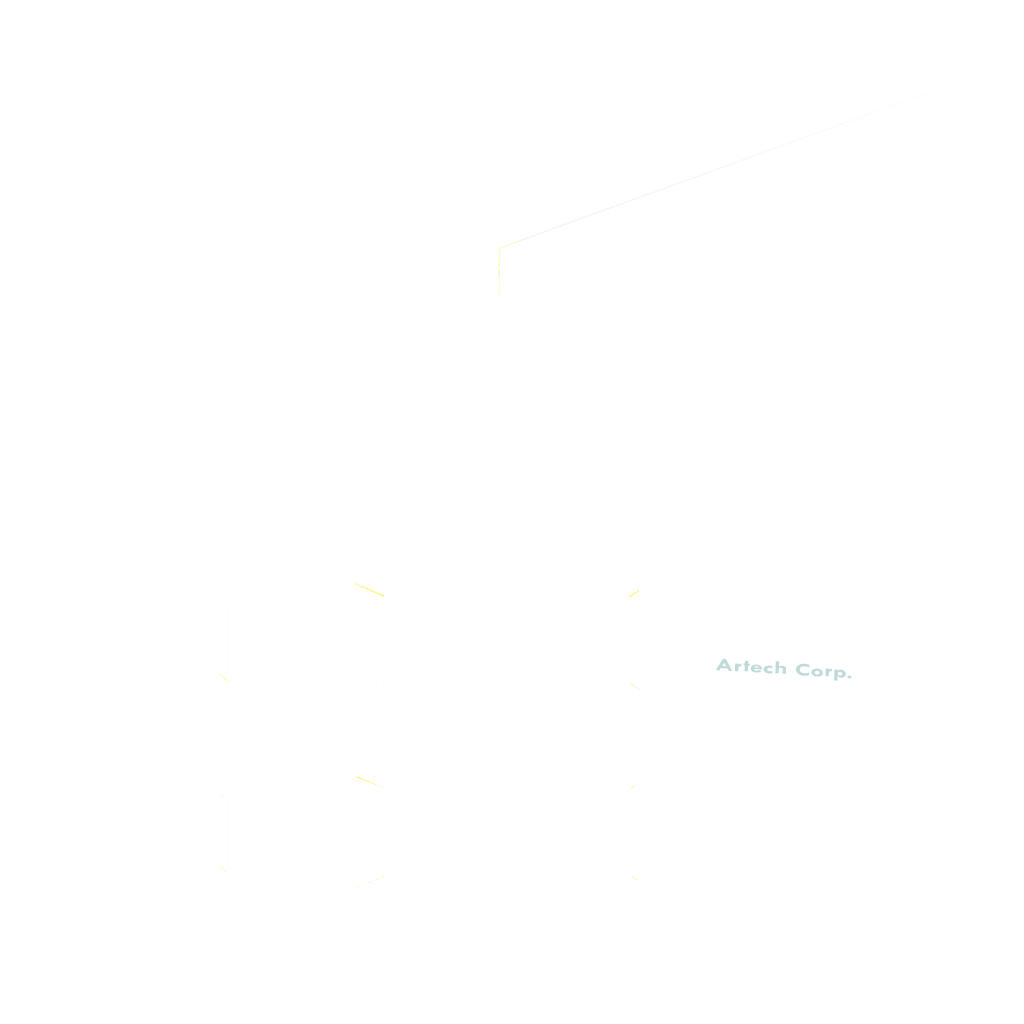
<style>
.page{position:relative;width:1024px;height:1024px;background:#ffffff}
.page>*{position:absolute;margin:0}
.t1{font:18.2px "TwCenMT-Bold";color:#c0dada;scale:1.46 1}
</style>
<div class="page">
<p class="t1" style="left:716px;top:658px;width:136px;height:23px;rotate:4deg">Artech Corp.</p>
</div>
